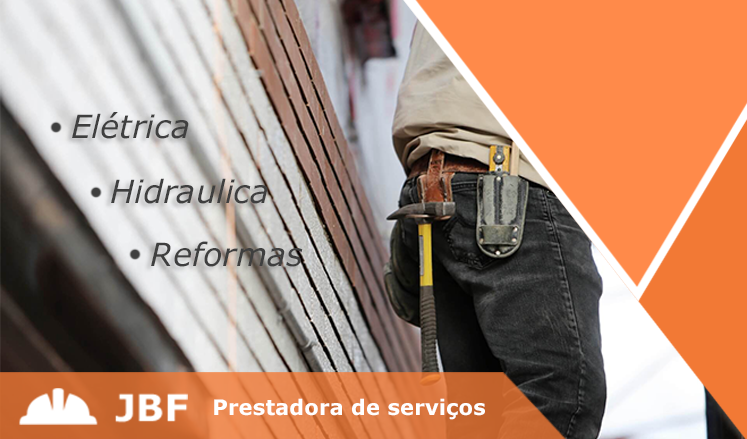
<style>
.page{position:relative;width:747px;height:439px}
.page>*{position:absolute;margin:0}
.t1{font:32px "Verdana-Italic";color:#3f3f3f}
.t2{font:21.3px "Verdana-Bold";color:#ffffff}
</style>
<div class="page">
<p class="t1" style="left:72px;top:112px;width:117px;height:27px">Elétrica</p>
<p class="t1" style="left:111px;top:178px;width:157px;height:26px">Hidraulica</p>
<p class="t1" style="left:151px;top:241px;width:152px;height:26px">Reformas</p>
<p class="t2" style="left:214px;top:398px;width:271px;height:22px">Prestadora de serviços</p>
</div>
